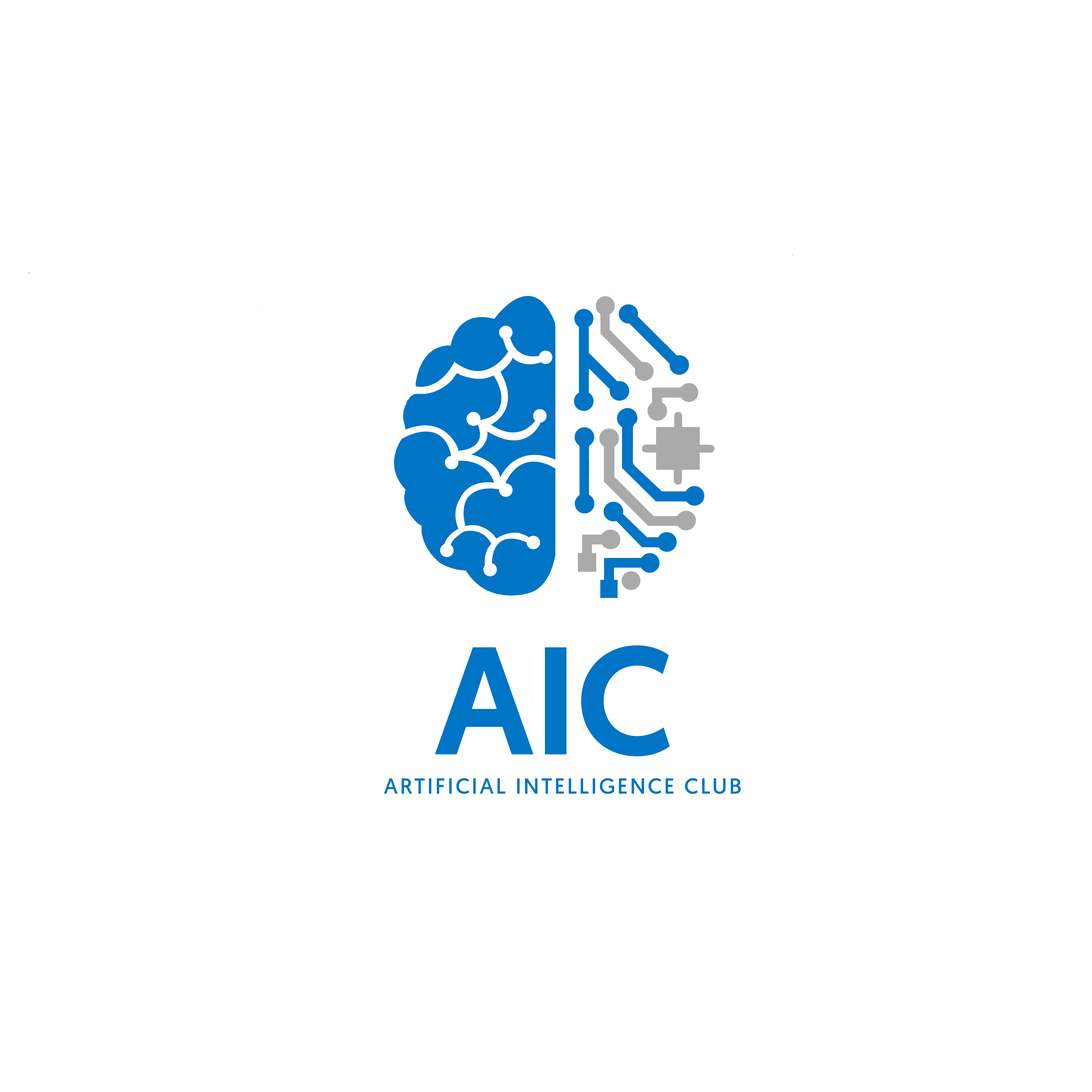
<style>
.page{position:relative;width:1092px;height:1092px;background:#ffffff}
.page>*{position:absolute;margin:0}
.t1{font:152.9px "Geomanist-Medium";color:#0075c5}
.t2{font:21.8px "Geomanist-Book";letter-spacing:0.1em;color:#0075c5}
</style>
<div class="page">
<p class="t1" style="left:435px;top:645px;width:235px;height:112px">AIC</p>
<p class="t2" style="left:384px;top:778px;width:357px;height:16px">ARTIFICIAL INTELLIGENCE CLUB</p>
</div>
